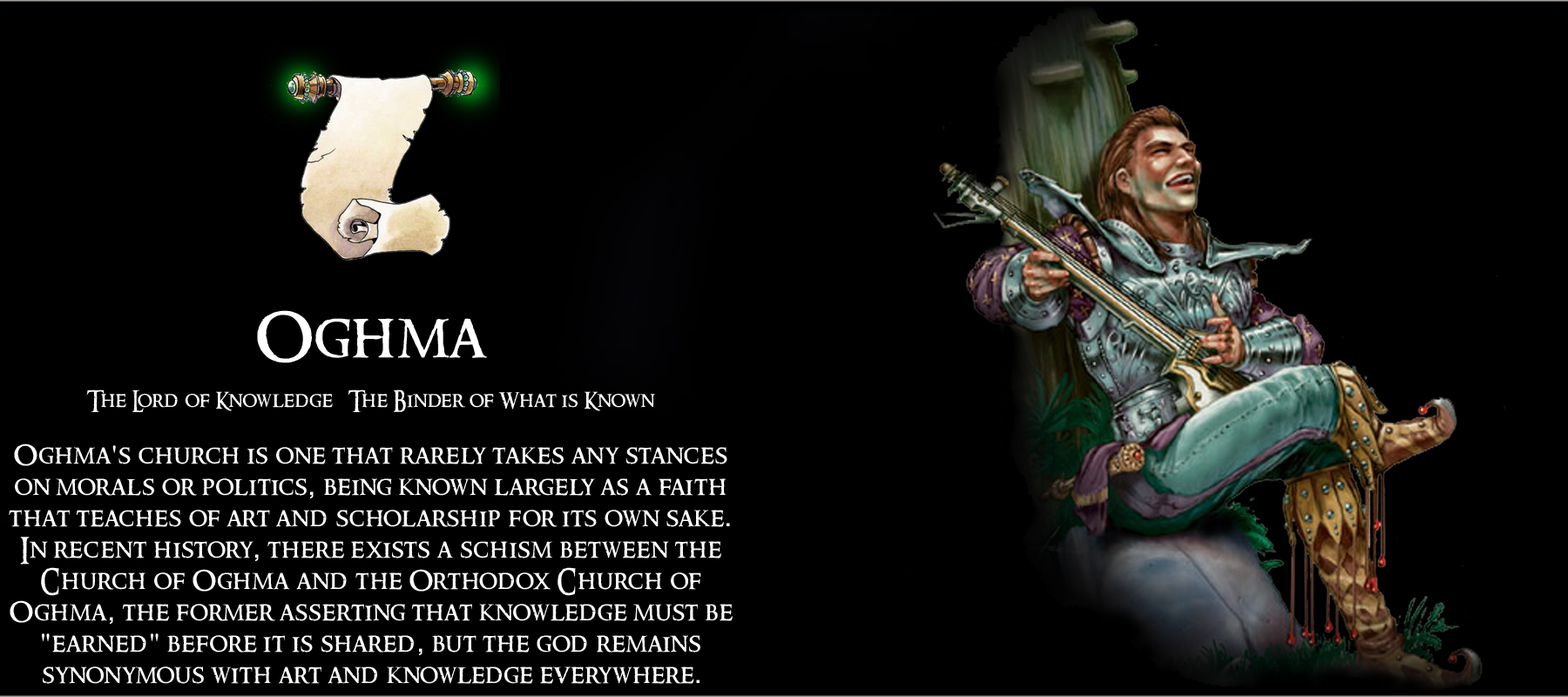
<style>
.page{position:relative;width:1568px;height:697px;background:#000000}
.page>*{position:absolute;margin:0}
.t1{font:26.1px "RingbearerMedium";letter-spacing:0.025em;color:#ffffff}
.t2{font:62.7px "RingbearerMedium";letter-spacing:0.025em;color:#ffffff}
.t3{font:20.9px "RingbearerMedium";letter-spacing:0.025em;color:#ffffff}
.t4{font:26.1px "Rockwell";letter-spacing:0.025em;color:#ffffff}
</style>
<div class="page">
<p class="t1" style="left:9px;top:310px;width:724px;height:374px;text-align:center"><span class="t2">Oghma<br></span><span class="t3"><br>The Lord of Knowledge   The Binder of What is Known<br><br></span>Oghma<span class="t4">'</span>s church is one that rarely takes any stances on morals or politics<span class="t4">,</span> being known largely as a faith that teaches of art and scholarship for its own sake<span class="t4">.</span> In recent history<span class="t4">,</span> there exists a schism between the Church of Oghma and the Orthodox Church of Oghma<span class="t4">,</span> the former asserting that knowledge must be <span class="t4">"</span>earned<span class="t4">"</span> before it is shared<span class="t4">,</span> but the god remains <br>synonymous with art and knowledge everywhere<span class="t4">.</span></p>
</div>
